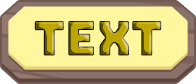
<style>
.page{position:relative;width:196px;height:84px;background:#fff69e}
.page>*{position:absolute;margin:0}
.t1{font:48px "Bungee-Regular"}
</style>
<div class="page">
<p class="t1" style="left:34px;top:21px;width:128px;height:35px">text</p>
</div>
